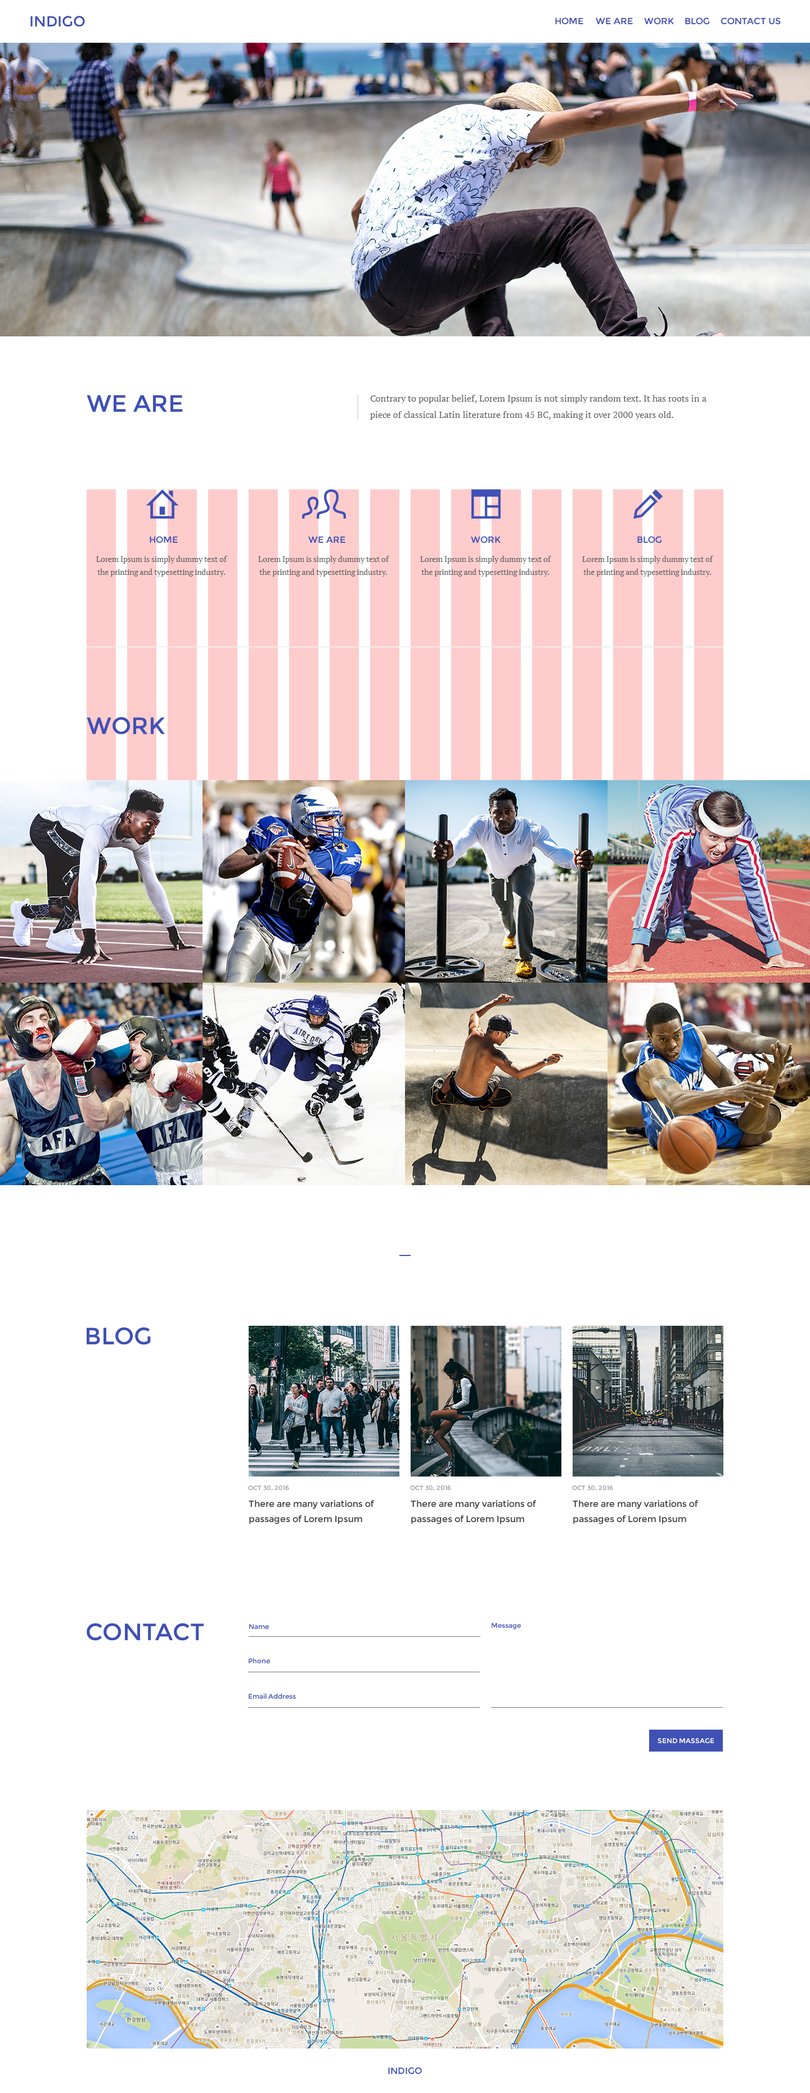
<style>
.page{position:relative;width:810px;height:2093px;background:#ffffff}
.page>*{position:absolute;margin:0}
.t1{font:14.6px "Montserrat-Regular";color:#3f51b5}
.t2{font:9px "Montserrat-Regular";color:#3f51b5}
.t3{font:23.6px "Montserrat-Regular";color:#3f51b5}
.t4{font:9px/16.3px "PTSerif-Regular";color:#616161}
.t5{font:7.9px/12.9px "PTSerif-Regular";color:#616161}
.t6{font:6.2px "Montserrat-Regular";color:#9e9e9e}
.t7{font:9px/15.2px "Montserrat-Regular";color:#424242}
.t8{font:6.8px "Montserrat-Regular";color:#3f51b5}
.t9{font:6.8px "Montserrat-Regular";color:#ffffff}
</style>
<div class="page">
<p class="t1" style="left:30px;top:16px;width:55px;height:11px">INDIGO</p>
<p class="t2" style="left:555px;top:17px;width:28px;height:8px">HOME</p>
<p class="t2" style="left:596px;top:17px;width:37px;height:7px">WE ARE</p>
<p class="t2" style="left:644px;top:17px;width:30px;height:8px">WORK</p>
<p class="t2" style="left:685px;top:17px;width:24px;height:8px">BLOG</p>
<p class="t2" style="left:721px;top:17px;width:60px;height:8px">CONTACT US</p>
<p class="t3" style="left:87px;top:395px;width:96px;height:17px">WE ARE</p>
<p class="t4" style="left:370px;top:395px;width:336px;height:25px">Contrary to popular belief, Lorem Ipsum is not simply random text. It has roots in a<br>piece of classical Latin literature from 45 BC, making it over 2000 years old.</p>
<p class="t2" style="left:150px;top:536px;width:28px;height:7px">HOME</p>
<p class="t2" style="left:308px;top:536px;width:37px;height:7px">WE ARE</p>
<p class="t2" style="left:471px;top:536px;width:30px;height:7px">WORK</p>
<p class="t2" style="left:637px;top:536px;width:25px;height:7px">BLOG</p>
<p class="t5" style="left:96px;top:556px;width:131px;height:21px;text-align:center">Lorem Ipsum is simply dummy text of<br>the printing and typesetting industry.</p>
<p class="t5" style="left:258px;top:556px;width:131px;height:21px;text-align:center">Lorem Ipsum is simply dummy text of<br>the printing and typesetting industry.</p>
<p class="t5" style="left:420px;top:556px;width:131px;height:21px;text-align:center">Lorem Ipsum is simply dummy text of<br>the printing and typesetting industry.</p>
<p class="t5" style="left:582px;top:556px;width:131px;height:21px;text-align:center">Lorem Ipsum is simply dummy text of<br>the printing and typesetting industry.</p>
<p class="t3" style="left:87px;top:717px;width:78px;height:18px">WORK</p>
<p class="t3" style="left:87px;top:1328px;width:64px;height:17px">BLOG</p>
<p class="t6" style="left:248px;top:1486px;width:41px;height:5px">OCT 30, 2016</p>
<p class="t6" style="left:410px;top:1486px;width:41px;height:5px">OCT 30, 2016</p>
<p class="t6" style="left:572px;top:1486px;width:41px;height:5px">OCT 30, 2016</p>
<p class="t7" style="left:249px;top:1500px;width:126px;height:24px">There are many variations of<br>passages of Lorem Ipsum</p>
<p class="t7" style="left:411px;top:1500px;width:126px;height:24px">There are many variations of<br>passages of Lorem Ipsum</p>
<p class="t7" style="left:573px;top:1500px;width:126px;height:24px">There are many variations of<br>passages of Lorem Ipsum</p>
<p class="t3" style="left:87px;top:1623px;width:117px;height:18px">CONTACT</p>
<p class="t8" style="left:249px;top:1624px;width:20px;height:5px">Name</p>
<p class="t8" style="left:492px;top:1623px;width:29px;height:7px">Message</p>
<p class="t8" style="left:249px;top:1658px;width:21px;height:5px">Phone</p>
<p class="t8" style="left:249px;top:1693px;width:47px;height:6px">Email Address</p>
<p class="t9" style="left:658px;top:1738px;width:56px;height:5px">SEND MASSAGE</p>
<p class="t2" style="left:388px;top:2067px;width:34px;height:7px">INDIGO</p>
</div>
